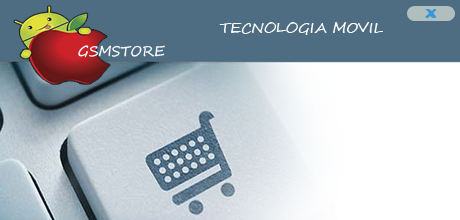
<style>
.page{position:relative;width:460px;height:220px;background:#4e6d82}
.page>*{position:absolute;margin:0}
.t1{font:19.1px "ForteMT";color:#3498db;scale:1.19 1}
.t2{font:14px "SegoeScript";color:#fdfefe;scale:1.04 1}
.t3{font:14px "SegoeScript";color:#ffffff}
</style>
<div class="page">
<p class="t1" style="left:425px;top:9px;width:12px;height:9px">x</p>
<p class="t2" style="left:219px;top:22px;width:164px;height:13px">TECNOLOGIA MOVIL</p>
<p class="t3" style="left:78px;top:45px;width:87px;height:13px">GSMSTORE</p>
</div>
